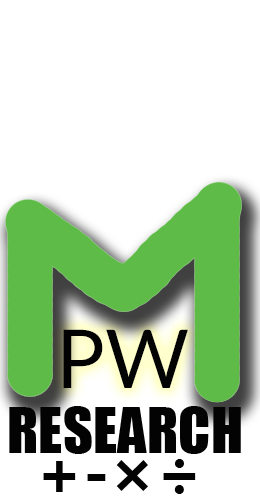
<style>
.page{position:relative;width:260px;height:500px;background:#ffffff}
.page>*{position:absolute;margin:0}
.t1{font:81.3px "Lato-Regular";color:#030303}
.t2{font:58.4px "Impact";color:#030303}
.t3{font:66px "KhmerUI-Bold";color:#030303}
</style>
<div class="page">
<p class="t1" style="left:63px;top:329px;width:125px;height:59px">PW</p>
<p class="t2" style="left:9px;top:406px;width:232px;height:48px">RESEARCH</p>
<p class="t3" style="left:43px;top:459px;width:153px;height:35px">+-×÷</p>
</div>
